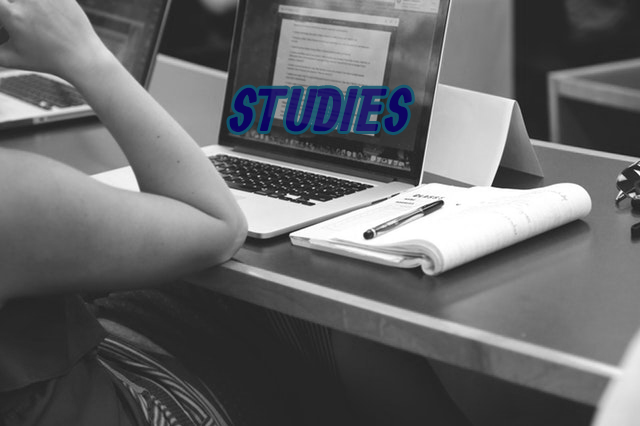
<style>
.page{position:relative;width:640px;height:426px}
.page>*{position:absolute;margin:0}
.t1{font:60px "Allan-Bold";color:#070066}
</style>
<div class="page">
<p class="t1" style="left:229px;top:87px;width:183px;height:45px;opacity:0.9">STUDIES</p>
</div>
